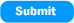
<style>
.page{position:relative;width:74px;height:23px;background:#0099ff}
.page>*{position:absolute;margin:0}
.t1{font:12.4px "FranklinGothic-Demi";color:#ffffff;scale:1.05 1}
</style>
<div class="page">
<p class="t1" style="left:15px;top:6px;width:41px;height:10px">Submit</p>
</div>
